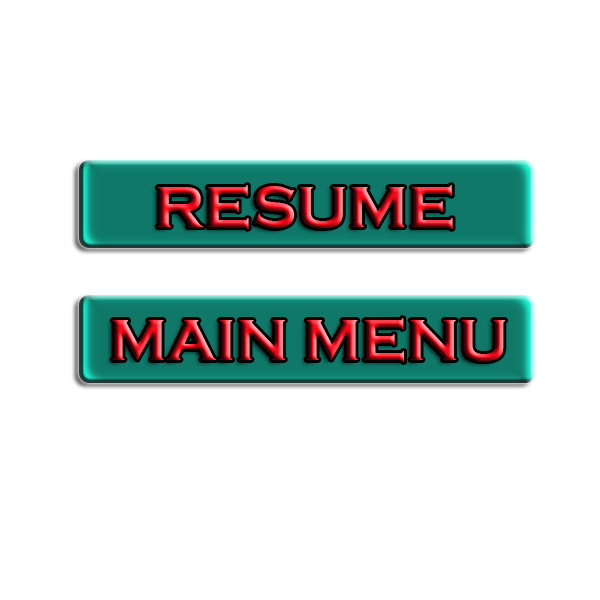
<style>
.page{position:relative;width:600px;height:600px;background:#ffffff}
.page>*{position:absolute;margin:0}
.t1{font:59.9px "CopperplateGothic-Bold";scale:1.04 1}
.t2{font:60px "CopperplateGothic-Bold"}
</style>
<div class="page">
<p class="t1" style="left:157px;top:185px;width:296px;height:44px">RESUME</p>
<p class="t2" style="left:112px;top:318px;width:394px;height:44px">MAIN MENU</p>
</div>
